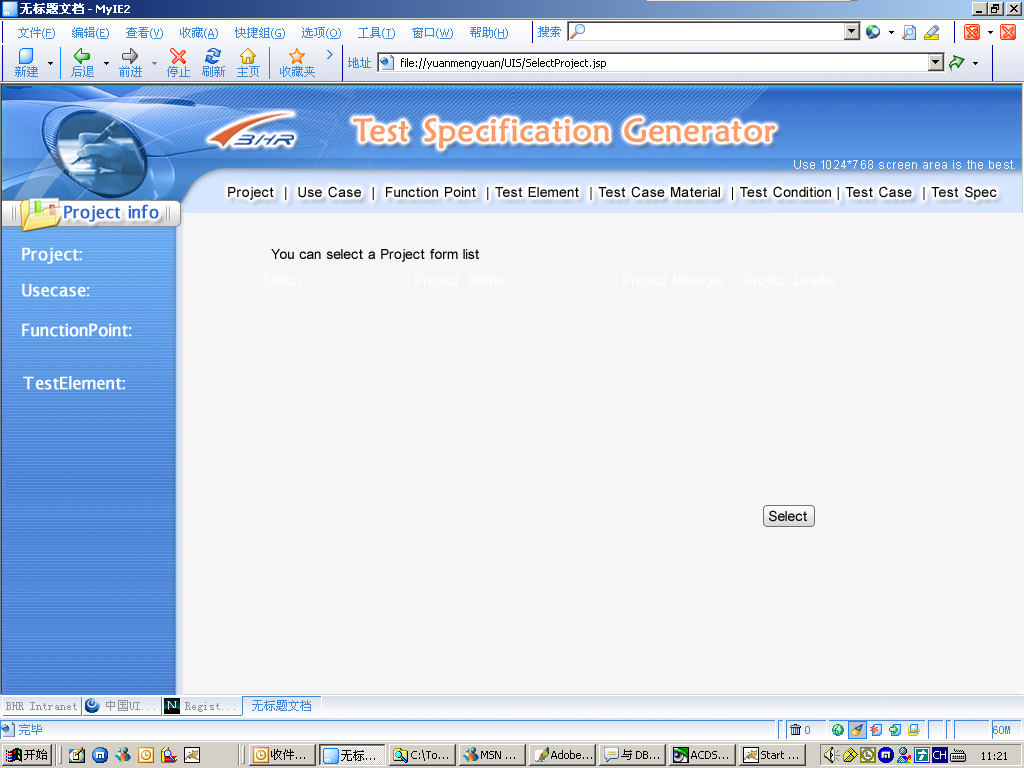
<style>
.page{position:relative;width:1024px;height:768px;background:#f6f6f6}
.page>*{position:absolute;margin:0}
.t1{font:32px "MaiandraGD-Regular";letter-spacing:0.075em;color:#ff9966;font-weight:bold}
.t2{font:12px "ArialMT";letter-spacing:0.1em;color:#f6f6f6}
.t3{font:14px "ArialMT";letter-spacing:0.1em;color:#000000}
.t4{font:17px "LucidaSans";letter-spacing:0.075em;color:#3366cc;font-weight:bold}
.t5{font:17px "LucidaSans";letter-spacing:0.075em;color:#ffffff;font-weight:bold}
.t6{font:14px "ArialMT";letter-spacing:0.075em;color:#000000}
.t7{font:14px "ArialMT";letter-spacing:0.075em;color:#ffffff}
</style>
<div class="page">
<p class="t1" style="left:353px;top:117px;width:423px;height:32px">Test Specification Generator</p>
<p class="t2" style="left:794px;top:160px;width:221px;height:9px">Use 1024*768 screen area is the best.</p>
<p class="t3" style="left:228px;top:186px;width:769px;height:15px">Project  |  Use Case  |  Function Point  | Test Element  | Test Case Material  | Test Condition | Test Case  | Test Spec</p>
<p class="t4" style="left:64px;top:204px;width:95px;height:18px">Project info</p>
<p class="t5" style="left:22px;top:247px;width:60px;height:17px">Project:</p>
<p class="t6" style="left:271px;top:249px;width:208px;height:13px">You can select a Project form list</p>
<p class="t7" style="left:263px;top:274px;width:574px;height:14px">Select                       Project  Name                        Project Manager    Project Leader</p>
<p class="t5" style="left:22px;top:283px;width:68px;height:14px">Usecase:</p>
<p class="t5" style="left:22px;top:323px;width:110px;height:14px">FunctionPoint:</p>
<p class="t5" style="left:23px;top:376px;width:102px;height:14px">TestElement:</p>
<p class="t6" style="left:769px;top:510px;width:38px;height:12px">Select</p>
</div>
